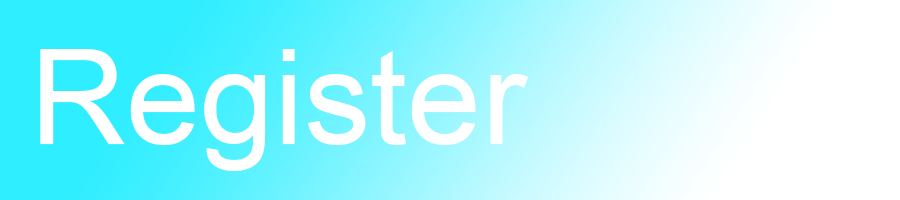
<style>
.page{position:relative;width:900px;height:200px;background:#ffffff}
.page>*{position:absolute;margin:0}
.t1{font:133.3px "ArialMT";color:#ffffff}
</style>
<div class="page">
<p class="t1" style="left:40px;top:49px;width:489px;height:122px">Register</p>
</div>
